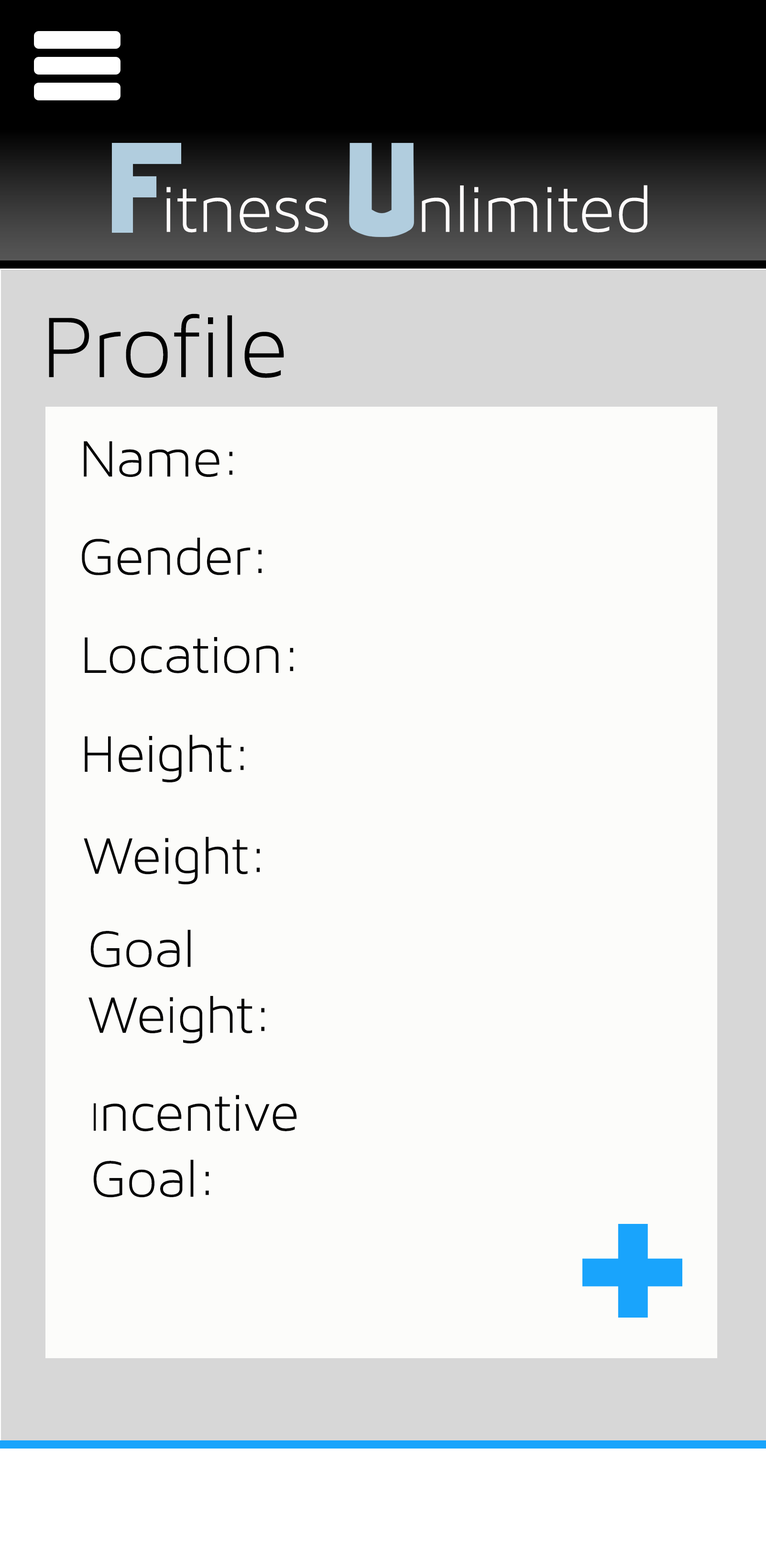
<style>
.page{position:relative;width:766px;height:1557px;background:#fcfcfa}
.page>*{position:absolute;margin:0}
.t1{font:68.9px "MavenProLight300-Regular";color:#fefbfb}
.t2{font:91.9px "MavenProLight300-Regular";color:#000000}
.t3{font:55px "MavenProLight300-Regular";color:#040404}
.t4{font:42.8px "MavenProLight300-Regular";color:#040404}
</style>
<div class="page">
<p class="t1" style="left:166px;top:185px;width:481px;height:48px">itness    nlimited</p>
<p class="t2" style="left:49px;top:314px;width:235px;height:64px">Profile</p>
<p class="t3" style="left:84px;top:441px;width:148px;height:36px">Name:</p>
<p class="t3" style="left:82px;top:538px;width:179px;height:37px">Gender:</p>
<p class="t3" style="left:85px;top:637px;width:208px;height:36px">Location:</p>
<p class="t3" style="left:85px;top:735px;width:159px;height:47px">Height:</p>
<p class="t3" style="left:84px;top:837px;width:176px;height:48px">Weight:</p>
<p class="t3" style="left:88px;top:930px;width:176px;height:114px">Goal <br>Weight:</p>
<p class="t3" style="left:93px;top:1095px;width:204px;height:103px"><span class="t4">I</span>ncentive<br>Goal:</p>
</div>
